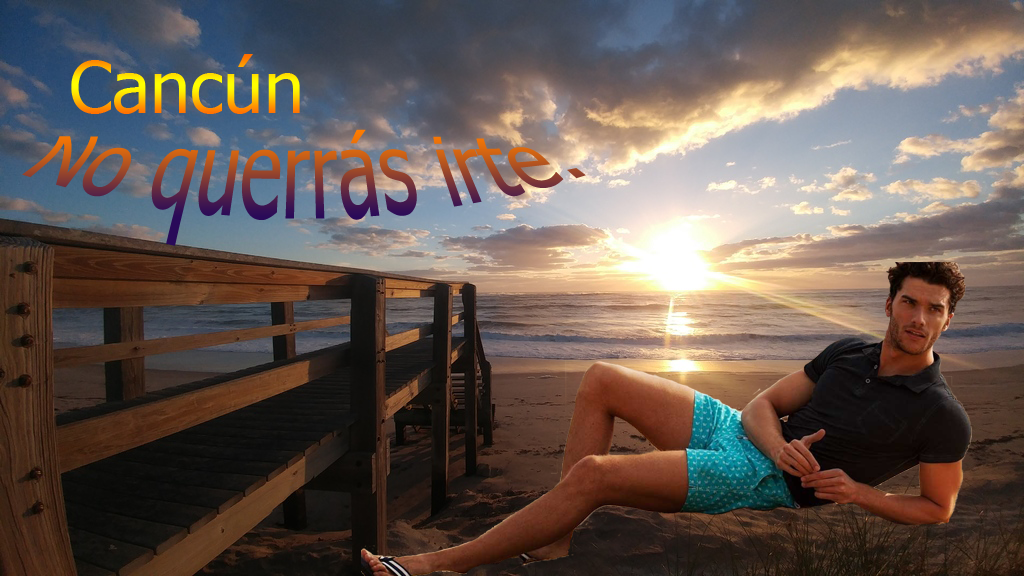
<style>
.page{position:relative;width:1024px;height:576px}
.page>*{position:absolute;margin:0}
.t1{font:72px "Tahoma"}
</style>
<div class="page">
<p class="t1" style="left:71px;top:54px;width:229px;height:60px">Cancún</p>
<p class="t1" style="left:22px;top:129px;width:564px;height:117px">No querrás irte.</p>
</div>
